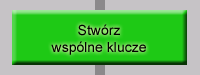
<style>
.page{position:relative;width:200px;height:75px;background:#c6c3c6}
.page>*{position:absolute;margin:0}
.t1{font:14px "ArialMT";color:#000000}
</style>
<div class="page">
<p class="t1" style="left:51px;top:24px;width:95px;height:31px;text-align:center">Stwórz<br>wspólne klucze</p>
</div>
